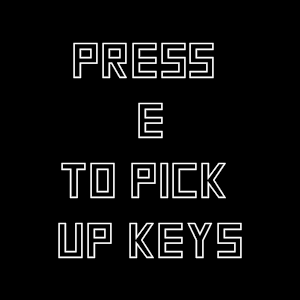
<style>
.page{position:relative;width:300px;height:300px;background:#000000}
.page>*{position:absolute;margin:0}
.t1{font:50px "SquareFontOutline";color:#ffffff}
</style>
<div class="page">
<p class="t1" style="left:58px;top:42px;width:184px;height:217px;text-align:center">press <br>e<br>to pick <br>up keys</p>
</div>
